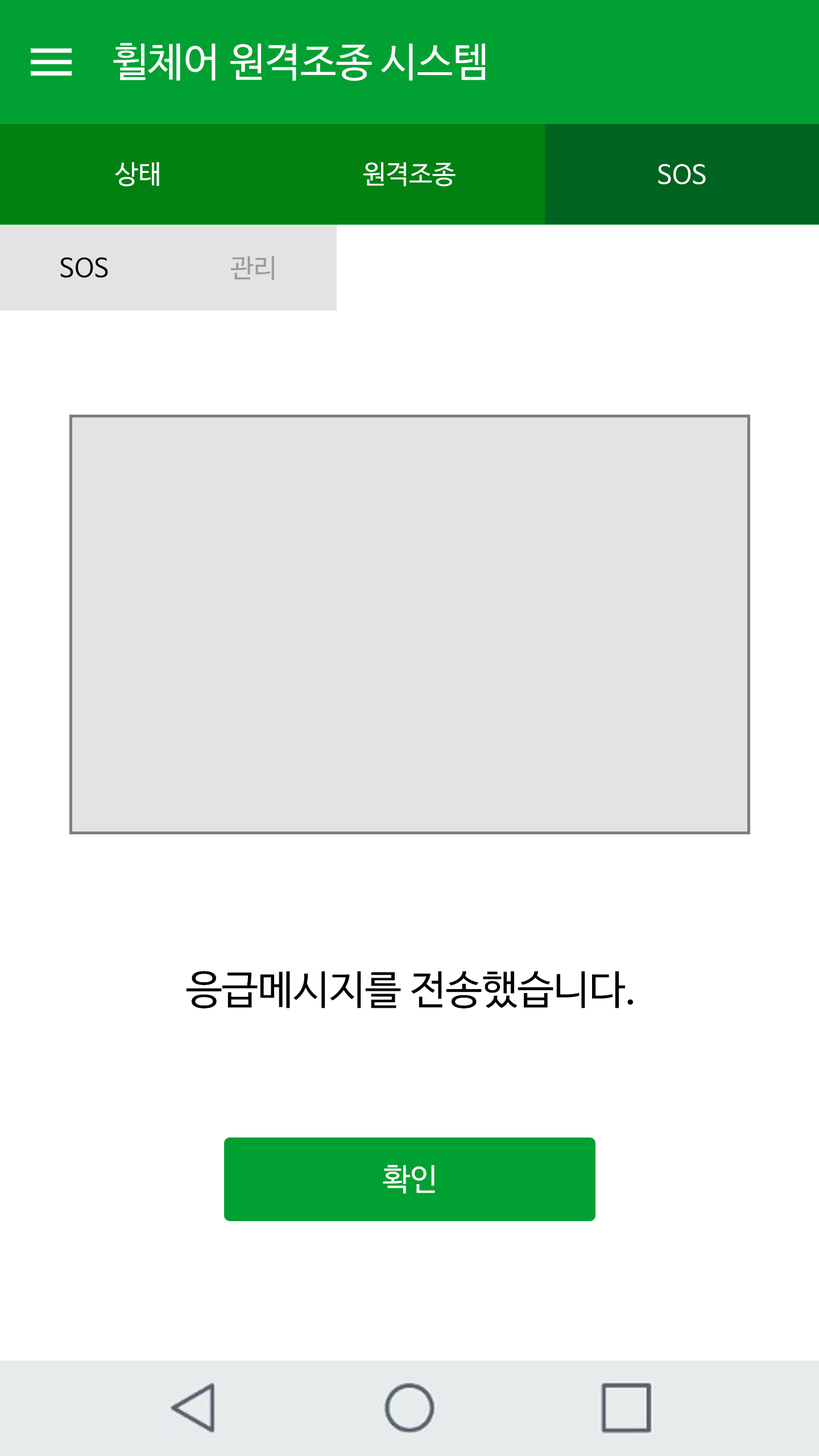
<style>
.page{position:relative;width:819px;height:1456px;background:#ffffff}
.page>*{position:absolute;margin:0}
.t1{font:40.3px "NanumBarunGothicOTF";color:#ffffff}
.t2{font:26.1px "NanumBarunGothicOTF";color:#ffffff}
.t3{font:26.1px "NanumBarunGothicOTF";color:#000000}
.t4{font:26.1px "NanumBarunGothicOTF";color:#9a9a9a}
.t5{font:40.3px "NanumBarunGothicOTF";color:#000000}
.t6{font:30.8px "NanumBarunGothicOTF";color:#ffffff}
</style>
<div class="page">
<p class="t1" style="left:113px;top:43px;width:372px;height:38px">휠체어 원격조종 시스템</p>
<p class="t2" style="left:115px;top:162px;width:44px;height:25px">상태</p>
<p class="t2" style="left:363px;top:162px;width:93px;height:25px">원격조종</p>
<p class="t2" style="left:658px;top:164px;width:48px;height:20px">SOS</p>
<p class="t3" style="left:60px;top:257px;width:48px;height:21px">SOS</p>
<p class="t4" style="left:230px;top:256px;width:44px;height:24px">관리</p>
<p class="t5" style="left:186px;top:971px;width:447px;height:37px">응급메시지를 전송했습니다.</p>
<p class="t6" style="left:383px;top:1165px;width:52px;height:29px">확인</p>
</div>
